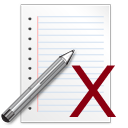
<style>
.page{position:relative;width:128px;height:128px;background:#ffffff}
.page>*{position:absolute;margin:0}
.t1{font:72px "ArialMT";color:#8a0010}
</style>
<div class="page">
<p class="t1" style="left:69px;top:65px;width:47px;height:52px">X</p>
</div>
